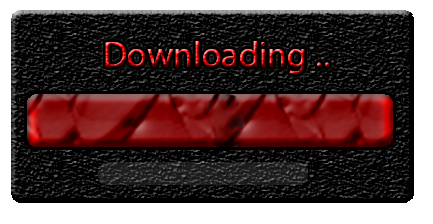
<style>
.page{position:relative;width:433px;height:224px;background:#000000}
.page>*{position:absolute;margin:0}
.t1{font:36px "MyriadPro-Regular"}
</style>
<div class="page">
<p class="t1" style="left:105px;top:41px;width:225px;height:33px">Downloading ..</p>
</div>
